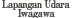
<style>
.page{position:relative;width:72px;height:18px;background:#ffffff}
.page>*{position:absolute;margin:0}
.t1{font:10px/9px "RyuminPro-ExBold";letter-spacing:-0.04em;color:#4c4843;scale:0.9 1}
</style>
<div class="page">
<p class="t1" style="left:2px;top:0px;width:68px;height:19px;text-align:center">Lapangan Udara<br>Iwagawa</p>
</div>
